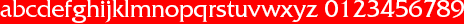
<style>
.page{position:relative;width:464px;height:24px;background:#ff0000}
.page>*{position:absolute;margin:0}
.t1{font:25px "FrizQuadrataStd";color:#ffffff}
</style>
<div class="page">
<p class="t1" style="left:72px;top:0px;width:392px;height:23px">ghijklmnopqrstuvwxyz 0123456789</p>
</div>
